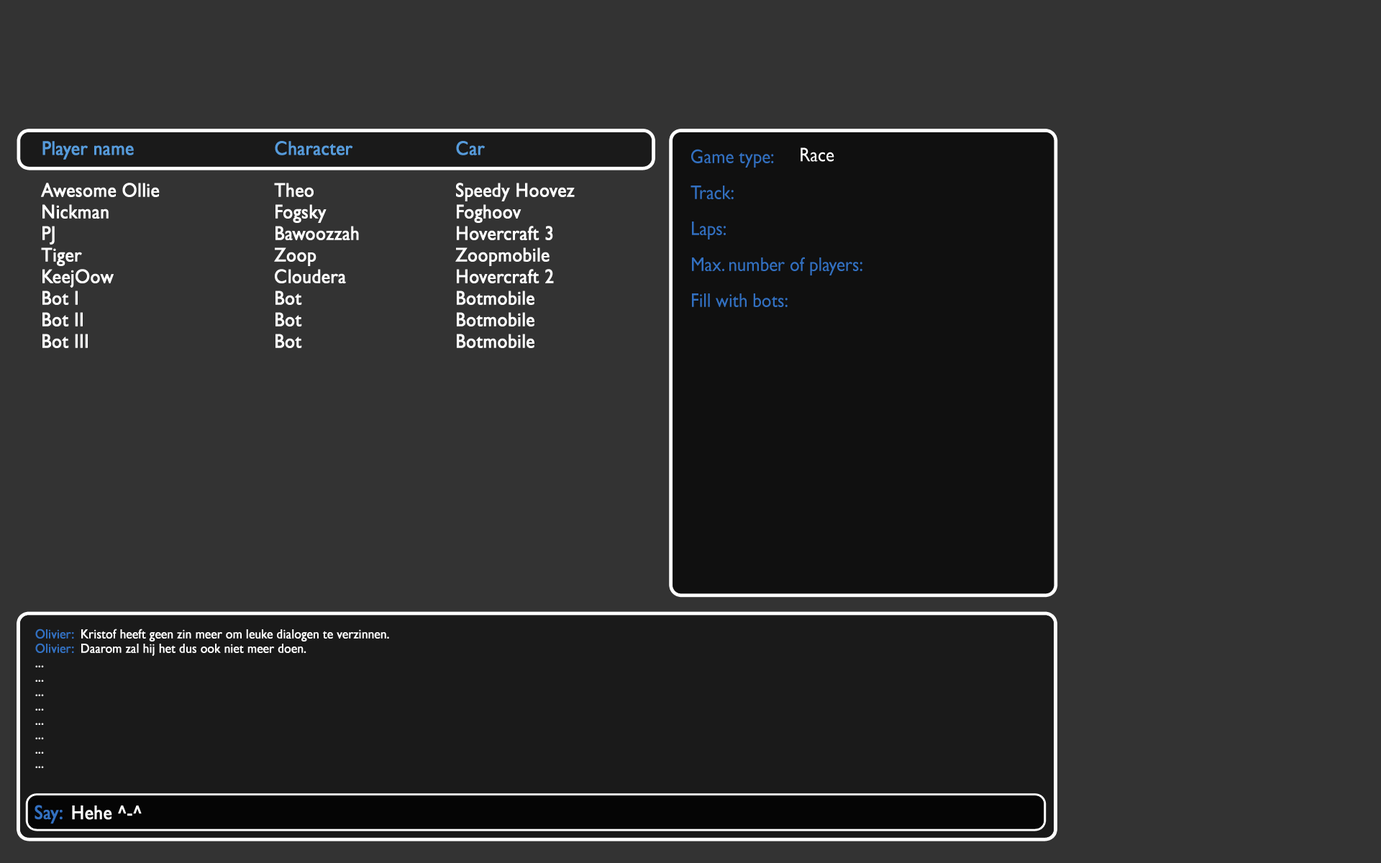
<style>
.page{position:relative;width:1381px;height:863px;background:#333333}
.page>*{position:absolute;margin:0}
.t1{font:19.8px "GillSansMT";color:#569bdb;font-weight:bold;scale:0.91 1}
.t2{font:19.8px/36px "GillSansMT";color:#3270c1;scale:0.91 1}
.t3{font:19.8px/36px "GillSansMT";color:#ffffff;scale:0.91 1}
.t4{font:19.8px "GillSansMT";color:#ffffff;scale:0.91 1}
.t5{font:19.8px "GillSansMT";color:#ffffff;font-weight:bold;scale:0.91 1}
.t6{font:13.2px "GillSansMT";color:#ffffff;font-weight:bold;scale:0.91 1}
.t7{font:13.2px/215.8px "GillSansMT";color:#3270c1;font-weight:bold;scale:0.91 1}
.t8{font:13.2px/215.8px "GillSansMT";color:#ffffff;font-weight:bold;scale:0.91 1}
.t9{font:13.2px "GillSansMT";color:#3270c1;font-weight:bold;scale:0.91 1}
.t10{font:19.8px "GillSansMT";color:#3270c1;font-weight:bold;scale:0.91 1}
</style>
<div class="page">
<p class="t1" style="left:42px;top:141px;width:443px;height:19px">Player name      Character    Car</p>
<p class="t2" style="left:691px;top:149px;width:172px;height:158px">Game type: <span class="t3"><br></span>Track: <span class="t3"><br></span>Laps: <span class="t3"><br></span>Max. number of players: <br>Fill with bots: <span class="t3"></span></p>
<p class="t4" style="left:801px;top:147px;width:34px;height:15px">Race</p>
<p class="t5" style="left:41px;top:183px;width:534px;height:165px">Awesome Ollie     Theo      Speedy Hoovez<br>Nickman       Fogsky     Foghoov<br>PJ         Bawoozzah    Hovercraft 3<br>Tiger        Zoop      Zoopmobile<br>KeejOow       Cloudera     Hovercraft 2<br>Bot I        Bot      Botmobile<br>Bot II        Bot      Botmobile<br>Bot III        Bot      Botmobile</p>
<p class="t6" style="left:35px;top:629px;width:354px;height:139px"><span class="t7">Olivier:</span><span class="t8">  Kristof heeft geen zin meer om leuke dialogen te verzinnen.<br></span><span class="t9">Olivier:</span>  Daarom zal hij het dus ook niet meer doen.<br>...<br>...<br>...<br>...<br>...<br>...<br>...<br>...</p>
<p class="t10" style="left:35px;top:805px;width:28px;height:19px">Say:</p>
<p class="t5" style="left:72px;top:806px;width:70px;height:14px">Hehe ^-^</p>
</div>
